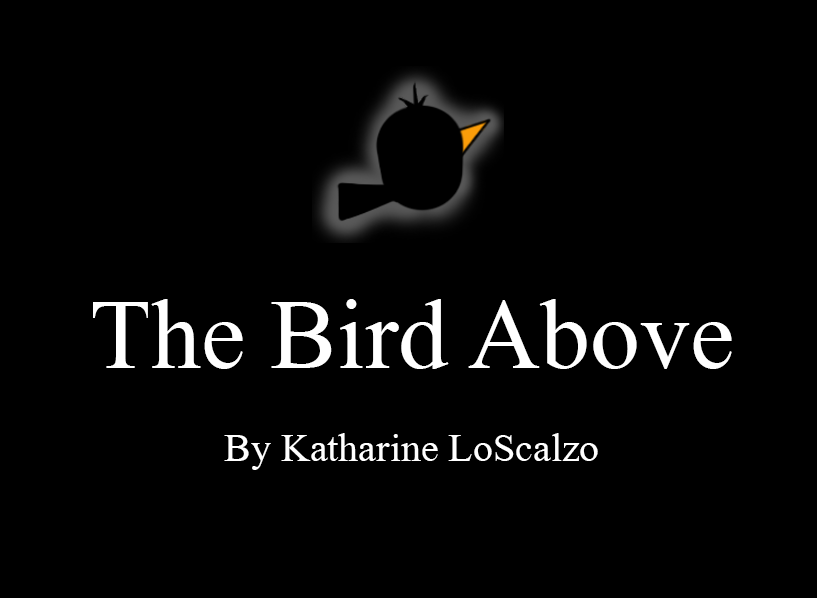
<style>
.page{position:relative;width:817px;height:598px;background:#000000}
.page>*{position:absolute;margin:0}
.t1{font:100px "MongolianBaiti";color:#ffffff}
.t2{font:40px "MongolianBaiti";color:#ffffff}
</style>
<div class="page">
<p class="t1" style="left:93px;top:299px;width:639px;height:70px">The Bird Above</p>
<p class="t2" style="left:224px;top:433px;width:374px;height:37px">By Katharine LoScalzo</p>
</div>
